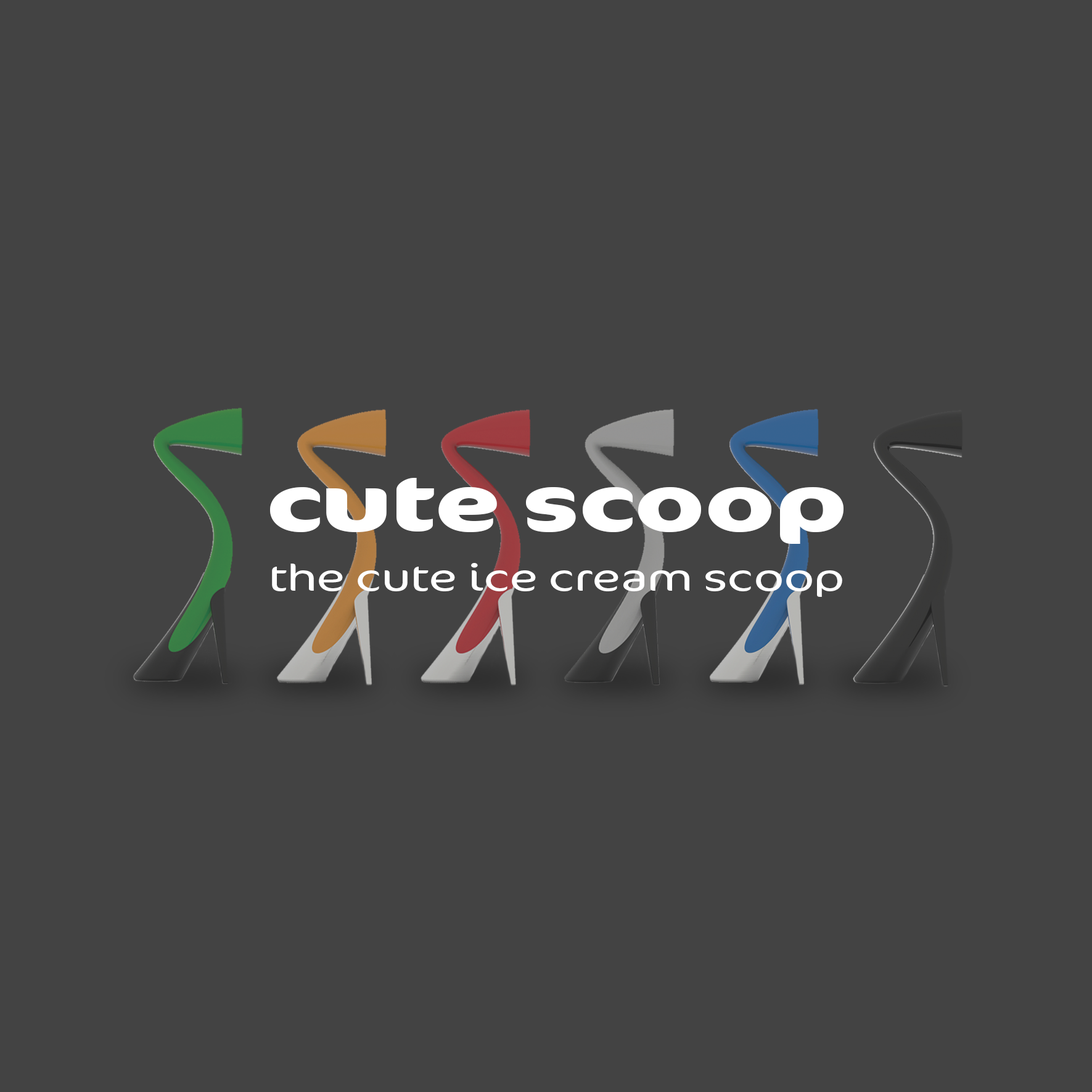
<style>
.page{position:relative;width:1092px;height:1092px;background:#434343}
.page>*{position:absolute;margin:0}
.t1{font:133.6px "CoconPro-Bold";letter-spacing:-0.015em;color:#ffffff;scale:1.39 1}
.t2{font:63.7px "CoconPro-Light";letter-spacing:-0.015em;color:#ffffff;scale:1.39 1}
</style>
<div class="page">
<p class="t1" style="left:270px;top:478px;width:573px;height:66px">cute scoop</p>
<p class="t2" style="left:272px;top:563px;width:570px;height:34px">the cute ice cream scoop</p>
</div>
